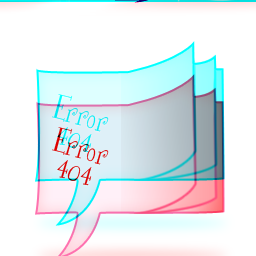
<style>
.page{position:relative;width:256px;height:256px;background:#ffffff}
.page>*{position:absolute;margin:0}
.t1{font:33px/24px "GirlsareWeird"}
</style>
<div class="page">
<p class="t1" style="left:52px;top:92px;width:57px;height:59px;text-align:center;rotate:16deg">Error<br>404</p>
</div>
